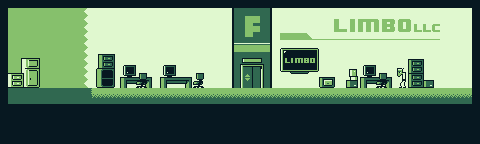
<style>
.page{position:relative;width:480px;height:144px;background:#071821}
.page>*{position:absolute;margin:0}
.t1{font:33px "PolenoBold";color:#86c06c;text-transform:uppercase}
.t2{font:16px "8BITWONDERNominal";color:#86c06c;text-transform:uppercase}
.t3{font:9px "8BITWONDERNominal";color:#86c06c;text-transform:uppercase}
.t4{font:6px "8BITWONDERNominal";color:#86c06c;text-transform:uppercase}
</style>
<div class="page">
<p class="t1" style="left:245px;top:16px;width:15px;height:21px">F</p>
<p class="t2" style="left:334px;top:19px;width:106px;height:13px">limbo<span class="t3">llc</span></p>
<p class="t4" style="left:285px;top:58px;width:30px;height:5px">limbo</p>
</div>
